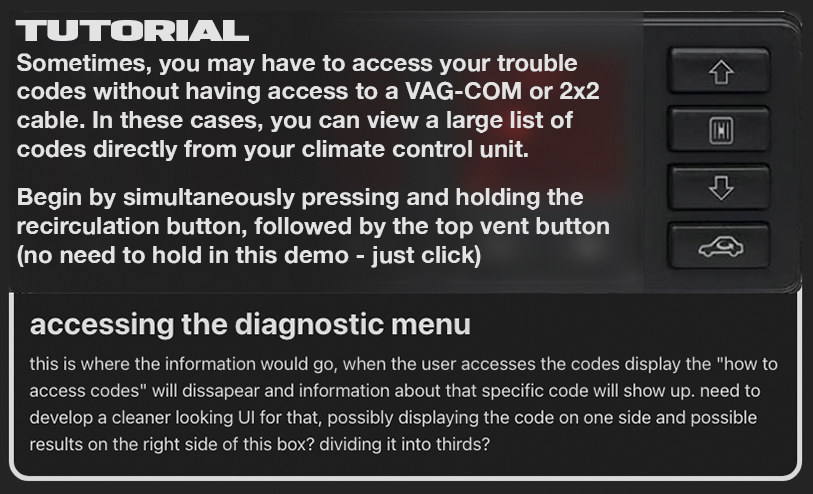
<style>
.page{position:relative;width:813px;height:494px}
.page>*{position:absolute;margin:0}
.t1{font:25.7px "FONTSPRINGDEMO-PODIUMSharp9.12Regular";color:#e3e3e3}
.t2{font:24px "AlteHaasGrotesk_Bold";color:#e3e3e3}
</style>
<div class="page">
<p class="t1" style="left:15px;top:20px;width:234px;height:21px">TUTORIAL</p>
<p class="t2" style="left:17px;top:53px;width:582px;height:108px">Sometimes, you may have to access your trouble <br>codes without having access to a VAG-COM or 2x2 <br>cable. In these cases, you can view a large list of <br>codes directly from your climate control unit.</p>
<p class="t2" style="left:17px;top:188px;width:592px;height:80px">Begin by simultaneously pressing and holding the <br>recirculation button, followed by the top vent button<br>(no need to hold in this demo - just click)</p>
</div>
